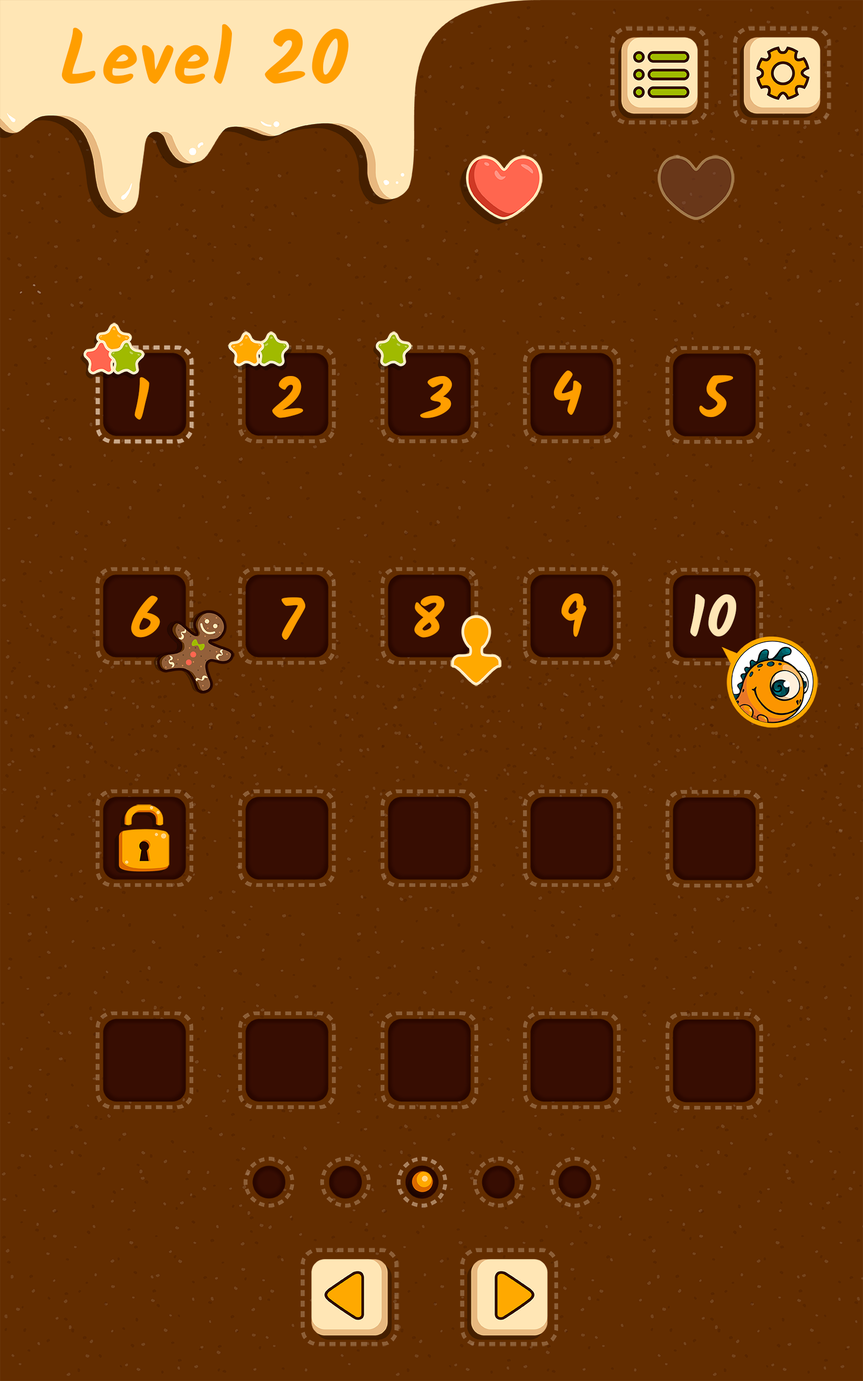
<style>
.page{position:relative;width:863px;height:1381px;background:#632d00}
.page>*{position:absolute;margin:0}
.t1{font:74.9px "Kalam-Bold";letter-spacing:0.025em;color:#ff9e00}
.t2{font:57.4px "Kalam-Bold";letter-spacing:0.025em;color:#ff9e00}
.t3{font:57.4px "Kalam-Bold";letter-spacing:0.025em;color:#ffe6b5}
</style>
<div class="page">
<p class="t1" style="left:62px;top:24px;width:287px;height:60px">Level 20</p>
<p class="t2" style="left:134px;top:377px;width:15px;height:43px">1</p>
<p class="t2" style="left:272px;top:376px;width:31px;height:42px">2</p>
<p class="t2" style="left:420px;top:376px;width:32px;height:42px">3</p>
<p class="t2" style="left:554px;top:370px;width:28px;height:45px">4</p>
<p class="t2" style="left:699px;top:375px;width:35px;height:43px">5</p>
<p class="t2" style="left:562px;top:593px;width:24px;height:44px">9</p>
<p class="t2" style="left:131px;top:596px;width:29px;height:42px">6</p>
<p class="t2" style="left:282px;top:597px;width:23px;height:43px">7</p>
<p class="t2" style="left:414px;top:596px;width:31px;height:42px">8</p>
<p class="t3" style="left:690px;top:594px;width:46px;height:43px">10</p>
</div>
